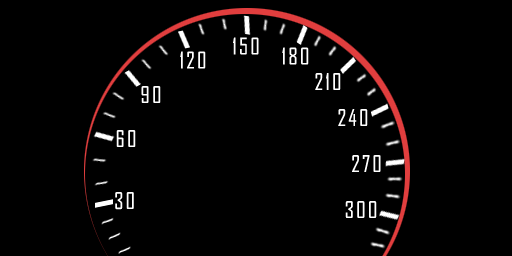
<style>
.page{position:relative;width:512px;height:256px;background:#000000}
.page>*{position:absolute;margin:0}
.t1{font:22px "AgencyFB-Reg";letter-spacing:0.1em;color:#ffffff}
</style>
<div class="page">
<p class="t1" style="left:233px;top:37px;width:26px;height:18px">150</p>
<p class="t1" style="left:180px;top:51px;width:26px;height:18px">120</p>
<p class="t1" style="left:282px;top:47px;width:27px;height:18px">180</p>
<p class="t1" style="left:315px;top:73px;width:26px;height:17px">210</p>
<p class="t1" style="left:141px;top:86px;width:20px;height:17px">90</p>
<p class="t1" style="left:338px;top:109px;width:30px;height:17px">240</p>
<p class="t1" style="left:116px;top:130px;width:20px;height:17px">60</p>
<p class="t1" style="left:352px;top:155px;width:29px;height:17px">270</p>
<p class="t1" style="left:115px;top:192px;width:19px;height:18px">30</p>
<p class="t1" style="left:345px;top:201px;width:32px;height:17px">300</p>
</div>
